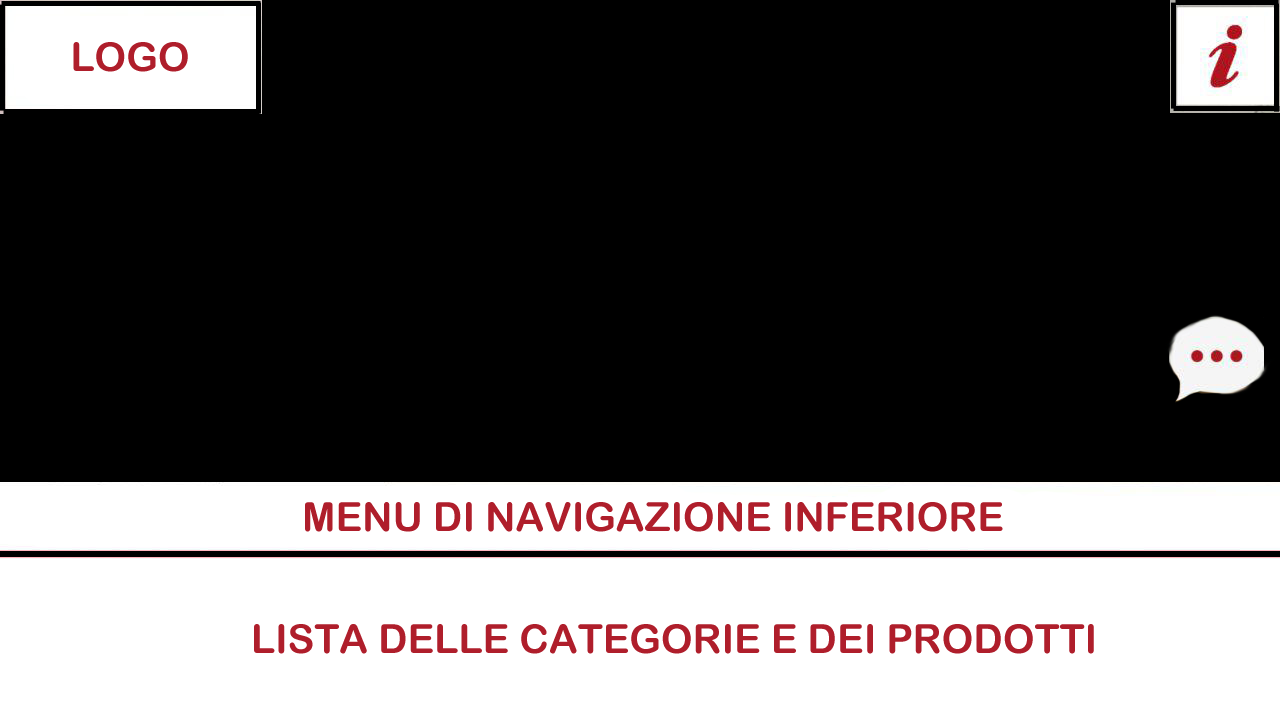
<style>
.page{position:relative;width:1280px;height:720px;background:#000000}
.page>*{position:absolute;margin:0}
.t1{font:40px "ArialRoundedMTBold";color:#af1e2b}
</style>
<div class="page">
<p class="t1" style="left:73px;top:42px;width:115px;height:30px">LOGO</p>
<p class="t1" style="left:305px;top:502px;width:698px;height:30px">MENU DI NAVIGAZIONE INFERIORE</p>
<p class="t1" style="left:254px;top:624px;width:840px;height:30px">LISTA DELLE CATEGORIE E DEI PRODOTTI</p>
</div>
